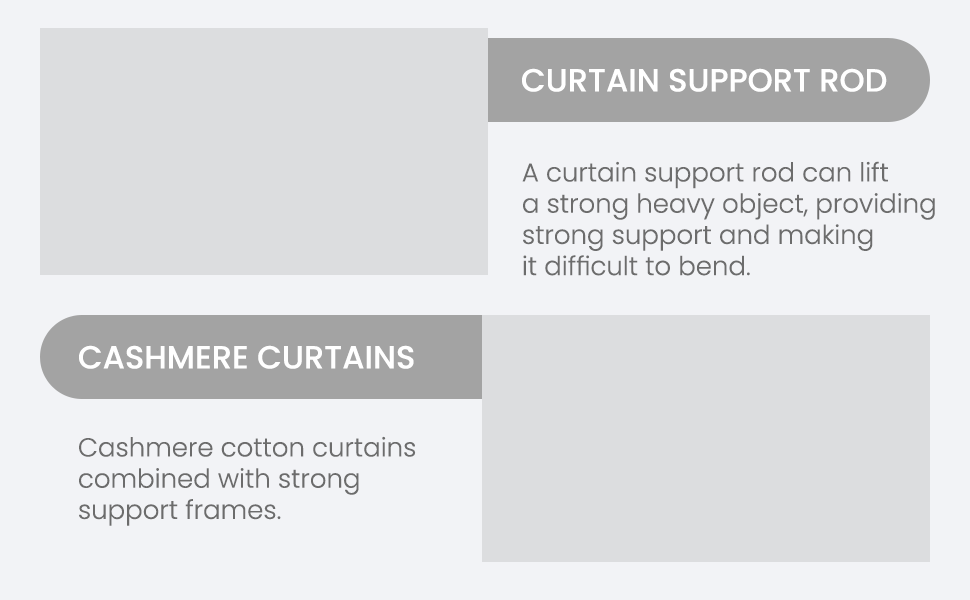
<style>
.page{position:relative;width:970px;height:600px;background:#f2f3f6}
.page>*{position:absolute;margin:0}
.t1{font:32px "Poppins-Medium";color:#ffffff;text-transform:uppercase}
.t2{font:26px "Poppins-Light";color:#6c6c6c}
</style>
<div class="page">
<p class="t1" style="left:522px;top:68px;width:365px;height:24px">CURTAIN SUPPORT ROD</p>
<p class="t2" style="left:522px;top:161px;width:413px;height:115px">A curtain support rod can lift<br>a strong heavy object, providing<br>strong support and making<br>it difficult to bend.</p>
<p class="t1" style="left:79px;top:345px;width:335px;height:24px">CASHMERE CURTAINS</p>
<p class="t2" style="left:79px;top:436px;width:337px;height:90px">Cashmere cotton curtains<br>combined with strong<br>support frames.</p>
</div>
